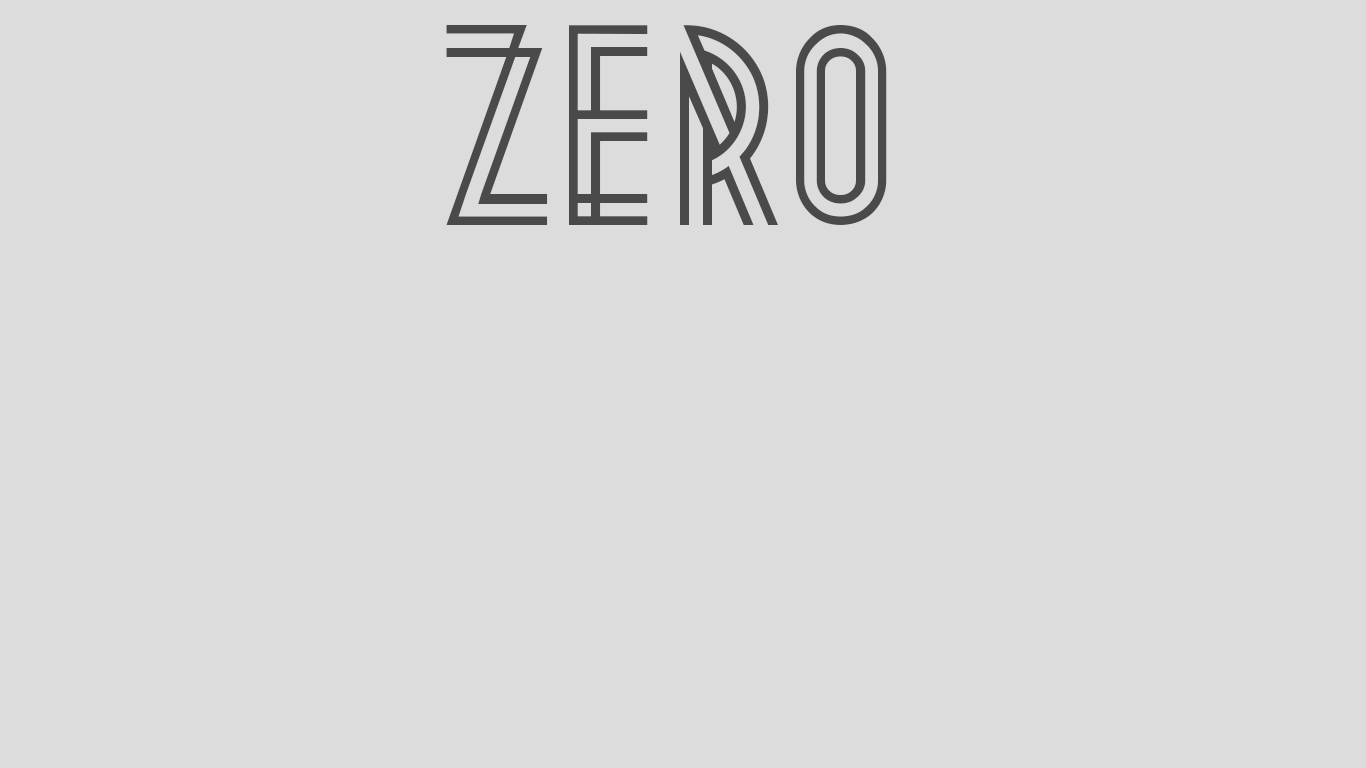
<style>
.page{position:relative;width:1366px;height:768px;background:#dcdcdc}
.page>*{position:absolute;margin:0}
.t1{font:250px "Metropolis1920";color:#4b4a4a}
</style>
<div class="page">
<p class="t1" style="left:446px;top:25px;width:441px;height:200px">zero</p>
</div>
